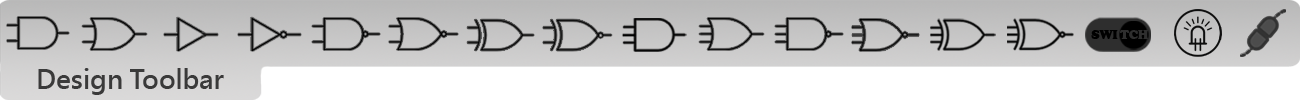
<style>
.page{position:relative;width:1300px;height:100px;background:#ffffff}
.page>*{position:absolute;margin:0}
.t1{font:12.5px "CooperBlack";color:#000000}
.t2{font:12.5px "CooperBlack";color:#2e2e2e}
.t3{font:26px "MicrosoftJhengHeiBold";color:#3b3b3b}
</style>
<div class="page">
<p class="t1" style="left:1091px;top:30px;width:27px;height:9px">SWI</p>
<p class="t2" style="left:1120px;top:30px;width:28px;height:9px">TCH</p>
<p class="t3" style="left:38px;top:68px;width:186px;height:27px">Design Toolbar</p>
</div>
